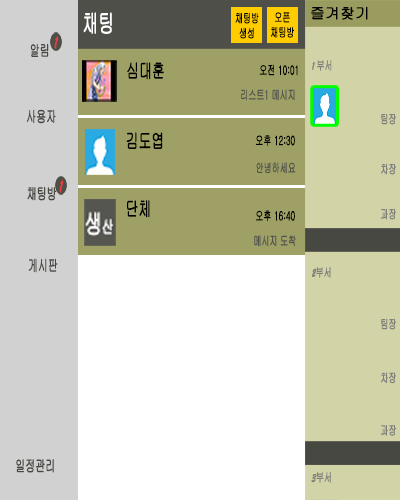
<style>
.page{position:relative;width:400px;height:500px;background:#ffffff}
.page>*{position:absolute;margin:0}
.t1{font:25px "Gulim";letter-spacing:-0.025em;color:#ffffff;font-weight:bold;scale:0.64 1}
.t2{font:12.5px "Gulim";letter-spacing:-0.025em;color:#000000;font-weight:bold;scale:0.64 1}
.t3{font:15.6px "Gulim";letter-spacing:-0.025em;color:#474842;font-weight:bold;scale:0.64 1}
.t4{font:20px "Gulim";letter-spacing:-0.025em;color:#000000;font-weight:bold;scale:0.64 1}
.t5{font:12.5px "Gulim";letter-spacing:-0.025em;color:#7f7f7c;font-weight:bold;scale:0.64 1}
.t6{font:12.5px "BrushScriptMT";letter-spacing:-0.025em;color:#7f7f7c;font-weight:bold;scale:0.64 1}
.t7{font:12.5px "Gulim";letter-spacing:-0.025em;color:#52534e;font-weight:bold;scale:0.64 1}
</style>
<div class="page">
<p class="t1" style="left:83px;top:12px;width:29px;height:22px">채팅</p>
<p class="t2" style="left:235px;top:12px;width:24px;height:27px;text-align:center">채팅방<br>생성</p>
<p class="t2" style="left:271px;top:12px;width:23px;height:26px;text-align:center">오픈<br>채팅방</p>
<p class="t3" style="left:30px;top:43px;width:19px;height:14px">알림</p>
<p class="t4" style="left:127px;top:62px;width:37px;height:18px">심대훈</p>
<p class="t2" style="left:259px;top:64px;width:39px;height:12px">오전 10:01</p>
<p class="t5" style="left:312px;top:60px;width:20px;height:11px"><span class="t6">1 </span>부서</p>
<p class="t7" style="left:241px;top:89px;width:54px;height:12px">리스트1 메시지</p>
<p class="t3" style="left:27px;top:109px;width:29px;height:15px">사용자</p>
<p class="t5" style="left:381px;top:113px;width:15px;height:12px">팀장</p>
<p class="t4" style="left:126px;top:132px;width:37px;height:17px">김도엽</p>
<p class="t2" style="left:255px;top:135px;width:40px;height:11px">오후 12:30</p>
<p class="t7" style="left:256px;top:162px;width:40px;height:12px">안녕하세요</p>
<p class="t5" style="left:381px;top:163px;width:15px;height:12px">차장</p>
<p class="t3" style="left:27px;top:187px;width:30px;height:14px">채팅방</p>
<p class="t4" style="left:127px;top:200px;width:23px;height:18px">단체</p>
<p class="t5" style="left:380px;top:208px;width:16px;height:12px">과장</p>
<p class="t2" style="left:255px;top:210px;width:40px;height:12px">오후 16:40</p>
<p class="t7" style="left:254px;top:235px;width:42px;height:12px">메시지 도착</p>
<p class="t3" style="left:28px;top:258px;width:30px;height:15px">게시판</p>
<p class="t5" style="left:312px;top:267px;width:19px;height:11px"><span class="t6">2</span>부서</p>
<p class="t5" style="left:381px;top:318px;width:15px;height:12px">팀장</p>
<p class="t5" style="left:381px;top:372px;width:15px;height:12px">차장</p>
<p class="t5" style="left:380px;top:425px;width:16px;height:11px">과장</p>
<p class="t3" style="left:16px;top:459px;width:38px;height:14px">일정관리</p>
<p class="t5" style="left:311px;top:472px;width:20px;height:11px"><span class="t6">3</span>부서</p>
</div>
